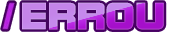
<style>
.page{position:relative;width:176px;height:32px}
.page>*{position:absolute;margin:0}
.t1{font:41.3px "DFSoGeiStd-W9";letter-spacing:-0.03em;font-weight:bold;scale:0.96 1}
</style>
<div class="page">
<p class="t1" style="left:22px;top:2px;width:142px;height:28px">ERROU</p>
<p class="t1" style="left:22px;top:2px;width:142px;height:28px">ERROU</p>
</div>
